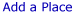
<style>
.page{position:relative;width:75px;height:16px;background:#ffffff}
.page>*{position:absolute;margin:0}
.t1{font:12px "Verdana";color:#0900b5}
</style>
<div class="page">
<p class="t1" style="left:2px;top:2px;width:70px;height:10px">Add a Place</p>
</div>
